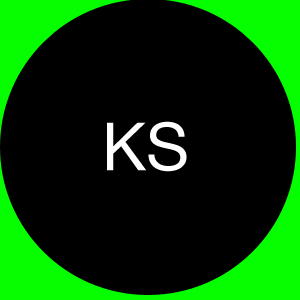
<style>
.page{position:relative;width:300px;height:300px;background:#000000}
.page>*{position:absolute;margin:0}
.t1{font:66.4px "HelveticaNeue";color:#ffffff}
</style>
<div class="page">
<p class="t1" style="left:107px;top:121px;width:80px;height:51px">KS</p>
</div>
